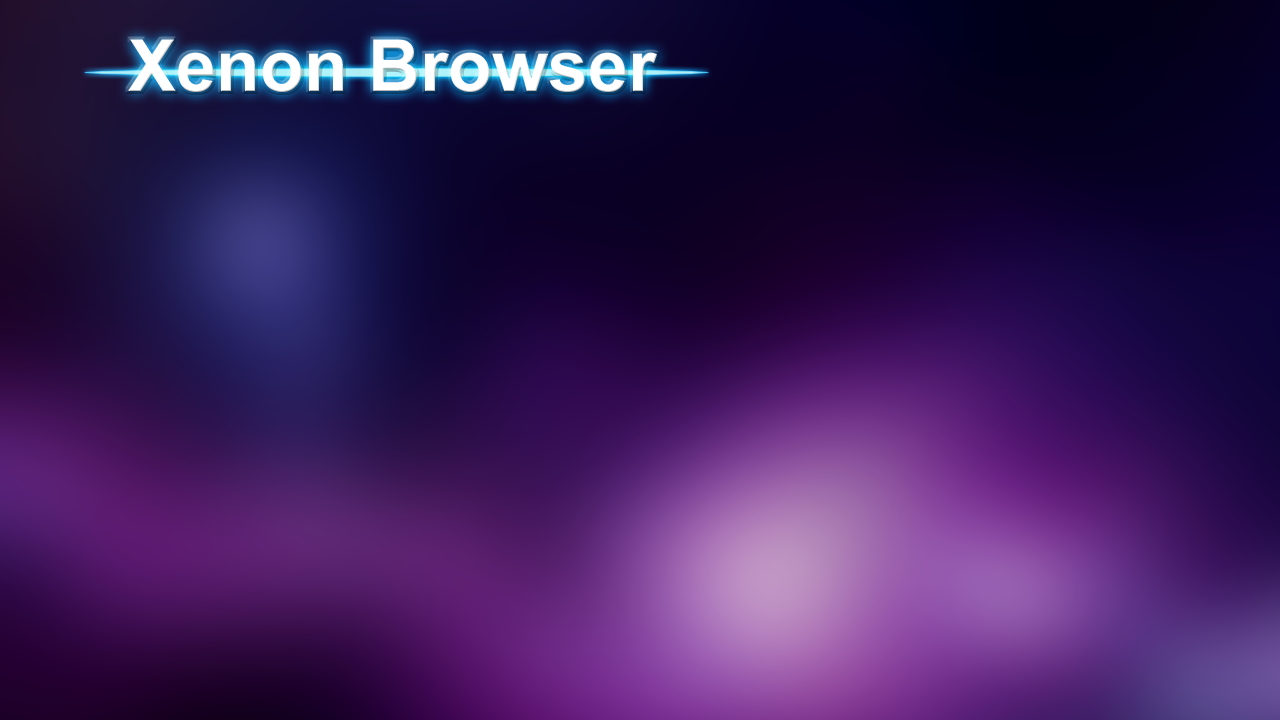
<style>
.page{position:relative;width:1280px;height:720px}
.page>*{position:absolute;margin:0}
.t1{font:72px "Arial-BoldMT";color:#ffffff}
</style>
<div class="page">
<p class="t1" style="left:128px;top:39px;width:529px;height:53px">Xenon Browser</p>
</div>
